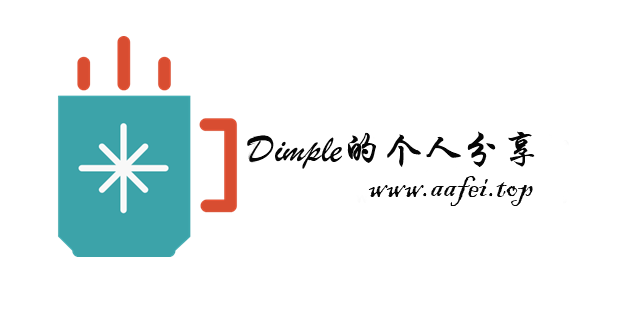
<style>
.page{position:relative;width:639px;height:314px;background:#ffffff}
.page>*{position:absolute;margin:0}
.t1{font:40px "STXingkai";color:#060606}
.t2{font:36px "BlackadderITC-Regular";color:#060606}
</style>
<div class="page">
<p class="t1" style="left:247px;top:131px;width:288px;height:38px">Dimple的个人分享</p>
<p class="t2" style="left:368px;top:176px;width:165px;height:30px">www.aafei.top</p>
</div>
